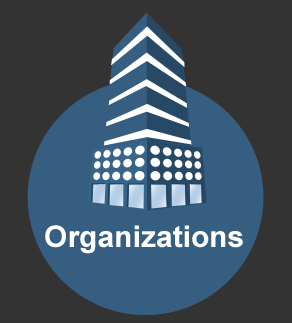
<style>
.page{position:relative;width:292px;height:323px;background:#333333}
.page>*{position:absolute;margin:0}
.t1{font:30px "Arial-BoldMT";color:#ffffff}
</style>
<div class="page">
<p class="t1" style="left:45px;top:225px;width:198px;height:29px">Organizations</p>
</div>
